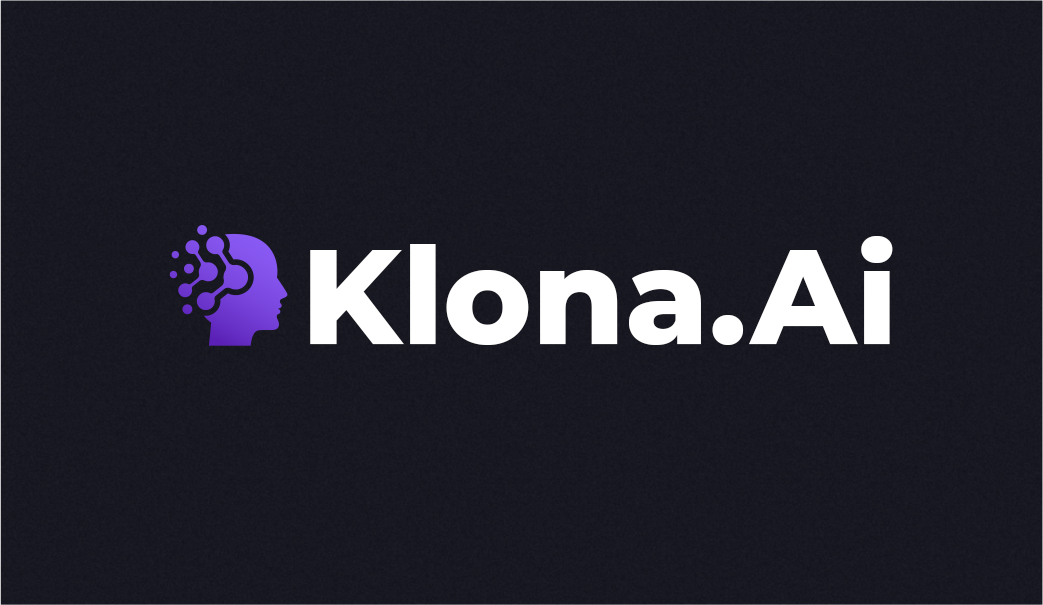
<style>
.page{position:relative;width:1043px;height:605px}
.page>*{position:absolute;margin:0}
.t1{font:133.4px "Montserrat-ExtraBold";color:#ffffff}
</style>
<div class="page">
<p class="t1" style="left:310px;top:236px;width:583px;height:109px">Klona.Ai</p>
</div>
